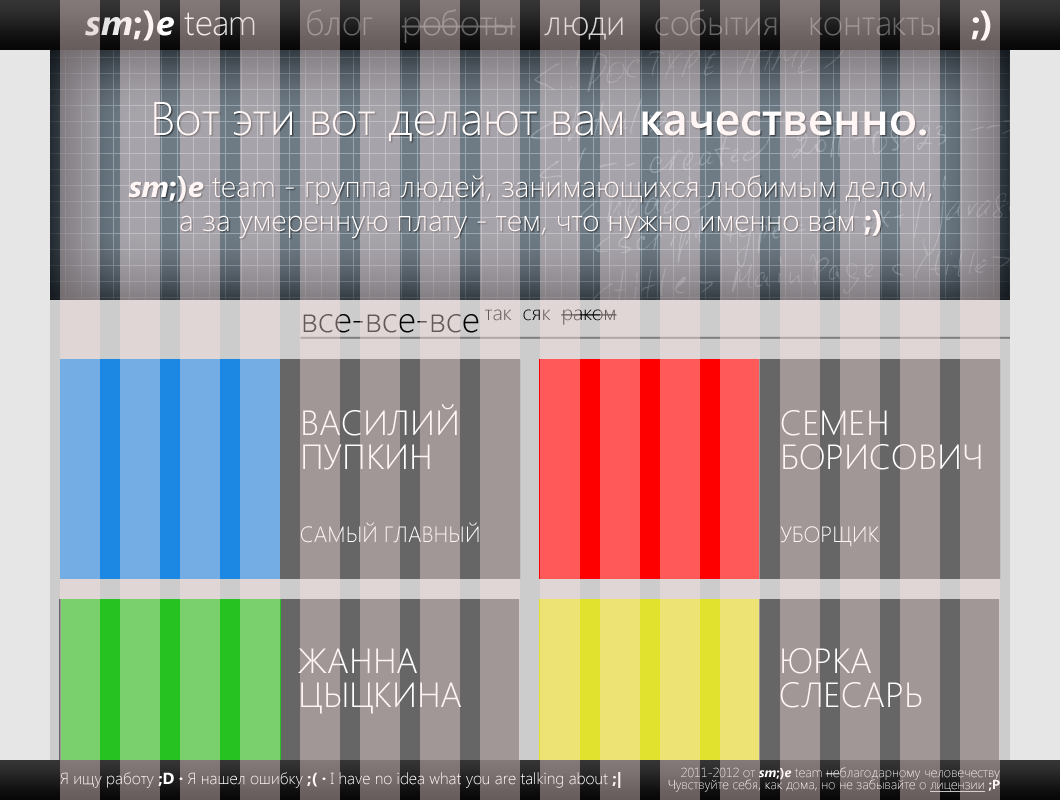
<style>
.page{position:relative;width:1060px;height:800px}
.page>*{position:absolute;margin:0}
.t1{font:35px "SegoeUI-Light";letter-spacing:-0.02em;color:#ffffff}
.t2{font:35px "SegoeUI-BoldItalic";color:#ffffff}
.t3{font:35px "SegoeUI-BoldItalic";letter-spacing:0.02em;color:#ffffff}
.t4{font:35px "SegoeUI-Bold";letter-spacing:0.02em;color:#ffffff}
.t5{font:35px "SegoeUI-Bold";color:#ffffff}
.t6{font:35px "SegoeUI-Light";letter-spacing:0.01em;color:#ffffff}
.t7{font:35px "SegoeUI-Light";letter-spacing:-0.05em;color:#ffffff}
.t8{font:35px "SegoeUI-Light"}
.t9{font:35px "SegoeUI-Light";letter-spacing:-0.035em}
.t10{font:35px "SegoeUI-Light";letter-spacing:0.01em}
.t11{font:35px "SegoeUI-Light";letter-spacing:-0.02em}
.t12{font:35px "SegoeUI-Bold"}
.t13{font:47px "SegoeUI-Light";color:#ffffff}
.t14{font:47px "SegoeUI-SemiBold";color:#ffffff}
.t15{font:30px/34px "SegoeUI-Light";color:#ffffff}
.t16{font:30px/34px "SegoeUI-BoldItalic";color:#ffffff}
.t17{font:30px/34px "SegoeUI-Bold";color:#ffffff}
.t18{font:35px/34px "SegoeUI-Light";color:#ffffff}
.t19{font:22px "SegoeUI-Light";color:#ffffff}
.t20{font:16px "SegoeUI-Light";color:#ffffff}
.t21{font:16px "SegoeUI-Bold";color:#ffffff}
.t22{font:13px/12px "SegoeUI-Light";color:#ffffff}
.t23{font:13px/12px "SegoeUI-BoldItalic";color:#ffffff}
.t24{font:13px/12px "SegoeUI-Bold";color:#ffffff}
.t25{font:13px/12px "SegoeUI-Light";color:#ffffff;text-decoration:underline}
</style>
<div class="page">
<p class="t1" style="left:85px;top:10px;width:170px;height:31px"><span class="t2">s</span><span class="t3">m</span><span class="t4">;</span><span class="t5">)</span><span class="t2">e </span><span class="t6">t</span>ea<span class="t7">m</span></p>
<p class="t8" style="left:307px;top:9px;width:684px;height:34px">блог   р<span class="t9">о</span><span class="t10">бо</span>ты   л<span class="t11">юд</span>и   с<span class="t11">об</span>ытия   конт<span class="t11">ак</span>ты   <span class="t12">;)</span></p>
<p class="t13" style="left:154px;top:102px;width:772px;height:40px">Вот эти вот делают вам <span class="t14">качественно.</span></p>
<p class="t15" style="left:128px;top:174px;width:804px;height:65px;text-align:center"><span class="t16">sm</span><span class="t17">;)</span><span class="t16">e</span> team - группа людей, занимающихся любимым делом,<br>а за умеренную плату - тем, что нужно именно вам <span class="t17">;)</span></p>
<p class="t8" style="left:303px;top:309px;width:314px;height:24px">все-все-все так  сяк  раком</p>
<p class="t18" style="left:303px;top:404px;width:154px;height:66px">ВАСИЛИЙ<br>ПУПКИН</p>
<p class="t18" style="left:781px;top:410px;width:200px;height:60px">СЕМЕН<br>БОРИСОВИЧ</p>
<p class="t19" style="left:301px;top:522px;width:178px;height:21px">САМЫЙ ГЛАВНЫЙ</p>
<p class="t19" style="left:780px;top:526px;width:99px;height:21px">УБОРЩИК</p>
<p class="t18" style="left:298px;top:648px;width:163px;height:66px">ЖАННА<br>ЦЫЦКИНА</p>
<p class="t18" style="left:780px;top:648px;width:142px;height:60px">ЮРКА<br>СЛЕСАРЬ</p>
<p class="t20" style="left:60px;top:772px;width:561px;height:16px">Я ищу работу <span class="t21">;D · </span>Я нашел ошибку <span class="t21">;( · </span>I have no idea what you are talking about <span class="t21">;|</span></p>
<p class="t22" style="left:668px;top:767px;width:332px;height:25px;text-align:right">2011-2012 от <span class="t23">sm</span><span class="t24">;)</span><span class="t23">e</span> team неблагодарному человечеству<br>Чувствуйте себя, как дома, но не забывайте о <span class="t25">лицензии </span><span class="t24">;P</span></p>
</div>
